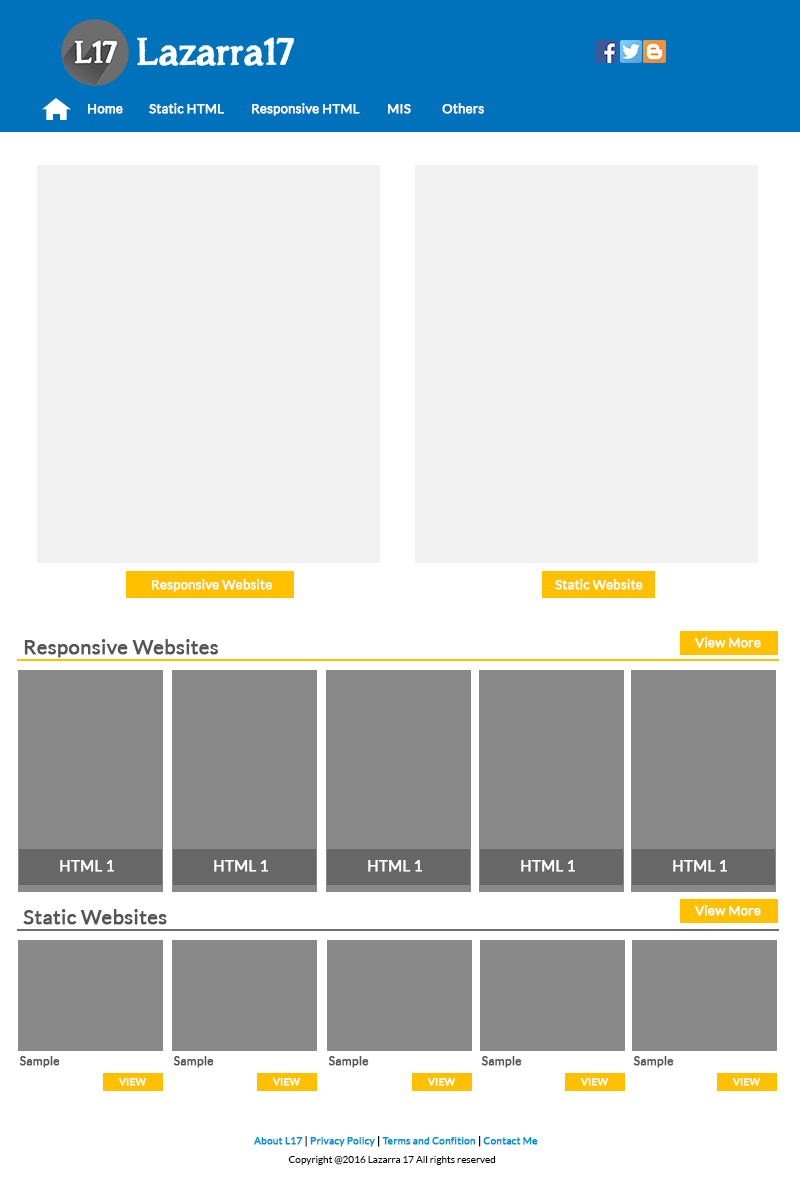
<style>
.page{position:relative;width:800px;height:1188px;background:#ffffff}
.page>*{position:absolute;margin:0}
.t1{font:13px "Lato-Regular";color:#ffffff;font-weight:bold}
.t2{font:20px "Lato-Regular";color:#555555;font-weight:bold}
.t3{font:15px "Lato-Regular";color:#ffffff;font-weight:bold}
.t4{font:12px "Lato-Regular";color:#555555;font-weight:bold}
.t5{font:10px "Lato-Regular";color:#ffffff;font-weight:bold}
.t6{font:10px "Lato-Regular";color:#0092de;font-weight:bold}
.t7{font:10px "Lato-Regular";color:#000000;font-weight:bold}
.t8{font:10px "Lato-Regular";color:#080808;font-weight:bold}
.t9{font:10px "Lato-Regular";color:#000000}
</style>
<div class="page">
<p class="t1" style="left:88px;top:104px;width:35px;height:10px">Home</p>
<p class="t1" style="left:149px;top:103px;width:75px;height:11px">Static HTML</p>
<p class="t1" style="left:252px;top:103px;width:108px;height:13px">Responsive HTML</p>
<p class="t1" style="left:388px;top:104px;width:23px;height:10px">MIS</p>
<p class="t1" style="left:442px;top:103px;width:42px;height:11px">Others</p>
<p class="t1" style="left:152px;top:579px;width:120px;height:13px">Responsive Website</p>
<p class="t1" style="left:555px;top:579px;width:88px;height:11px">Static Website</p>
<p class="t2" style="left:24px;top:639px;width:194px;height:19px">Responsive Websites</p>
<p class="t1" style="left:694px;top:637px;width:67px;height:11px">View More</p>
<p class="t3" style="left:60px;top:860px;width:54px;height:12px">HTML 1</p>
<p class="t3" style="left:214px;top:860px;width:54px;height:12px">HTML 1</p>
<p class="t3" style="left:368px;top:860px;width:54px;height:12px">HTML 1</p>
<p class="t3" style="left:521px;top:860px;width:54px;height:12px">HTML 1</p>
<p class="t3" style="left:673px;top:860px;width:54px;height:12px">HTML 1</p>
<p class="t1" style="left:694px;top:905px;width:67px;height:11px">View More</p>
<p class="t2" style="left:23px;top:909px;width:144px;height:16px">Static Websites</p>
<p class="t4" style="left:19px;top:1056px;width:41px;height:12px">Sample</p>
<p class="t4" style="left:173px;top:1056px;width:41px;height:12px">Sample</p>
<p class="t4" style="left:328px;top:1056px;width:41px;height:12px">Sample</p>
<p class="t4" style="left:481px;top:1056px;width:41px;height:12px">Sample</p>
<p class="t4" style="left:633px;top:1056px;width:41px;height:12px">Sample</p>
<p class="t5" style="left:118px;top:1078px;width:28px;height:8px">VIEW</p>
<p class="t5" style="left:272px;top:1078px;width:28px;height:8px">VIEW</p>
<p class="t5" style="left:427px;top:1078px;width:28px;height:8px">VIEW</p>
<p class="t5" style="left:580px;top:1078px;width:28px;height:8px">VIEW</p>
<p class="t5" style="left:732px;top:1078px;width:28px;height:8px">VIEW</p>
<p class="t6" style="left:253px;top:1136px;width:285px;height:11px">About L17 <span class="t7">|</span> Privacy Policy <span class="t7">|</span> Terms and Confition <span class="t8">| </span>Contact Me</p>
<p class="t9" style="left:288px;top:1155px;width:208px;height:10px">Copyright @2016 Lazarra 17 All rights reserved</p>
</div>
